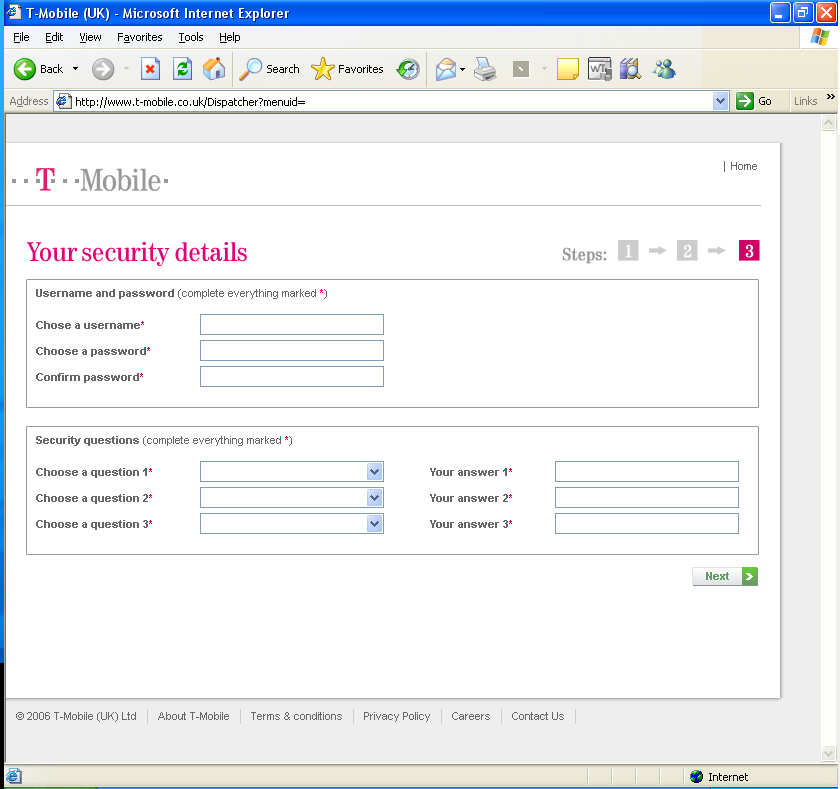
<style>
.page{position:relative;width:840px;height:789px;background:#ffffff}
.page>*{position:absolute;margin:0}
.t1{font:28px "Tele-Antiqua";color:#e20074}
.t2{font:18px "Tele-Antiqua";color:#ffffff;font-weight:bold}
.t3{font:18px "Tele-Antiqua";color:#999999;font-weight:bold}
.t4{font:11px "ArialMT";color:#666666}
.t5{font:11px "Arial-BoldMT";color:#666666}
.t6{font:11px "ArialMT";color:#e20074}
.t7{font:11px/16px "Arial-BoldMT";color:#666666}
.t8{font:11px/16px "Arial-BoldMT";color:#e20074}
.t9{font:11px/26px "Arial-BoldMT";color:#666666}
.t10{font:11px/26px "Arial-BoldMT";color:#e20074}
.t11{font:11px "Arial-BoldMT";color:#669a65}
</style>
<div class="page">
<p class="t1" style="left:26px;top:242px;width:221px;height:24px">Your security details</p>
<p class="t2" style="left:625px;top:244px;width:7px;height:14px">1</p>
<p class="t2" style="left:683px;top:244px;width:9px;height:14px">2</p>
<p class="t2" style="left:745px;top:244px;width:9px;height:14px">3</p>
<p class="t3" style="left:562px;top:247px;width:45px;height:17px">Steps:</p>
<p class="t4" style="left:36px;top:289px;width:291px;height:94px"><span class="t5">Username and password </span>(complete everything marked<span class="t6"> *</span>)<br><span class="t7"><br>Chose a username</span><span class="t8">*<br></span><span class="t9">Choose a password</span><span class="t10">*<br></span><span class="t9">Confirm password</span><span class="t10">*</span></p>
<p class="t4" style="left:36px;top:436px;width:256px;height:94px"><span class="t5">Security questions </span>(complete everything marked<span class="t6"> *</span>)<br><span class="t7"><br>Choose a question 1</span><span class="t8">*<br></span><span class="t9">Choose a </span><span class="t7">question 2</span><span class="t10">*<br></span><span class="t9">Choose a </span><span class="t7">question 3</span><span class="t10">*</span></p>
<p class="t7" style="left:430px;top:468px;width:82px;height:60px">Your answer 1<span class="t8">*<br></span><span class="t9">Your answer</span> 2<span class="t10">*<br></span><span class="t9">Your answer</span> 3<span class="t10">*</span></p>
<p class="t11" style="left:706px;top:572px;width:23px;height:8px">Next</p>
</div>
